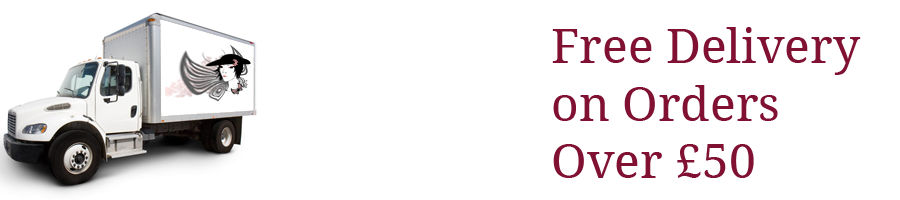
<style>
.page{position:relative;width:900px;height:200px;background:#ffffff}
.page>*{position:absolute;margin:0}
.t1{font:48px "DroidSerif";color:#801133}
</style>
<div class="page">
<p class="t1" style="left:552px;top:27px;width:309px;height:151px">Free Delivery<br>on Orders <br>Over £50</p>
</div>
